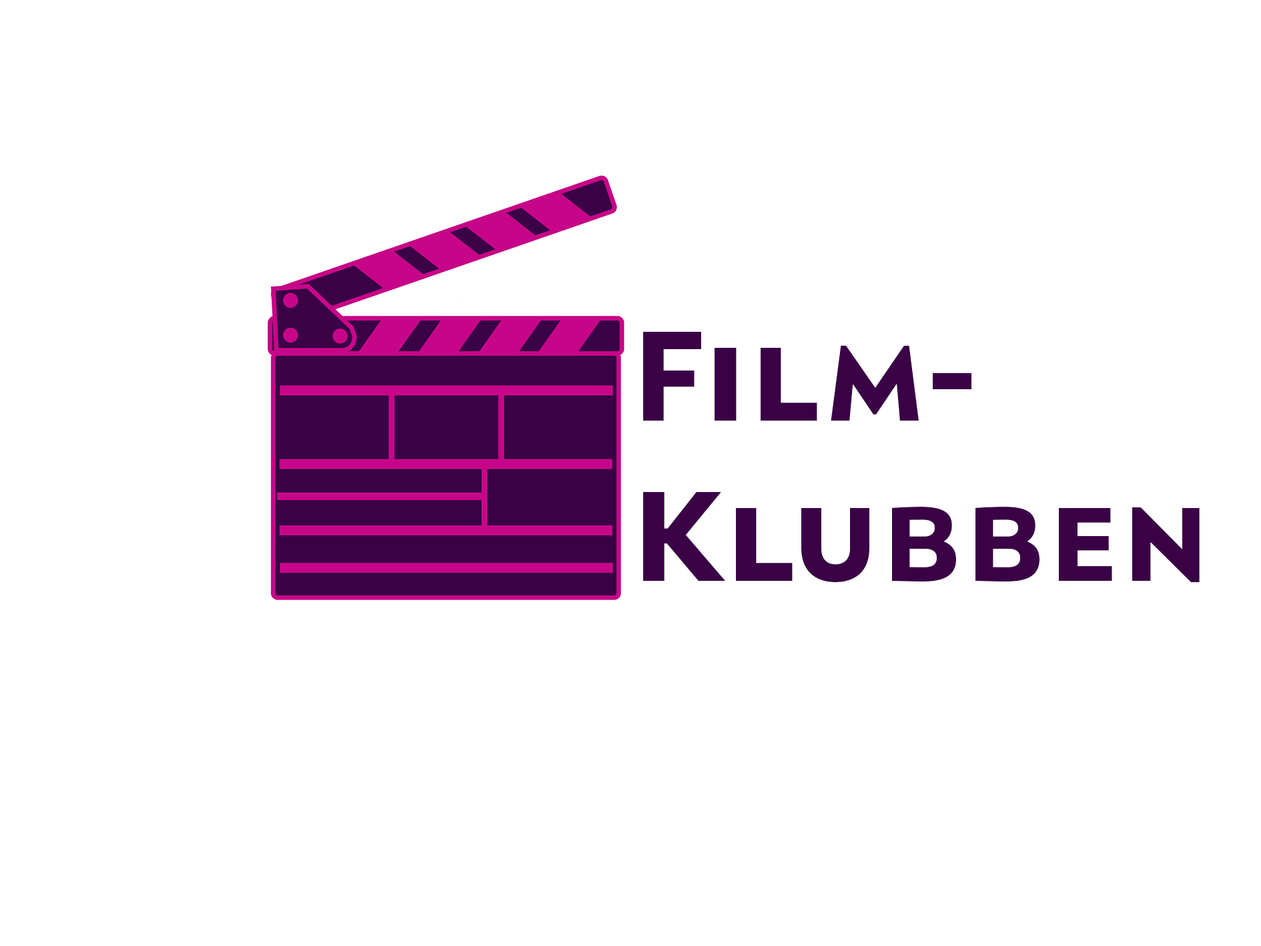
<style>
.page{position:relative;width:1261px;height:946px;background:#ffffff}
.page>*{position:absolute;margin:0}
.t1{font:133.5px "Orqquidea-Sans_DEMO-Bold";color:#3a0146}
</style>
<div class="page">
<p class="t1" style="left:643px;top:332px;width:557px;height:250px">Film-<br>Klubben</p>
</div>
